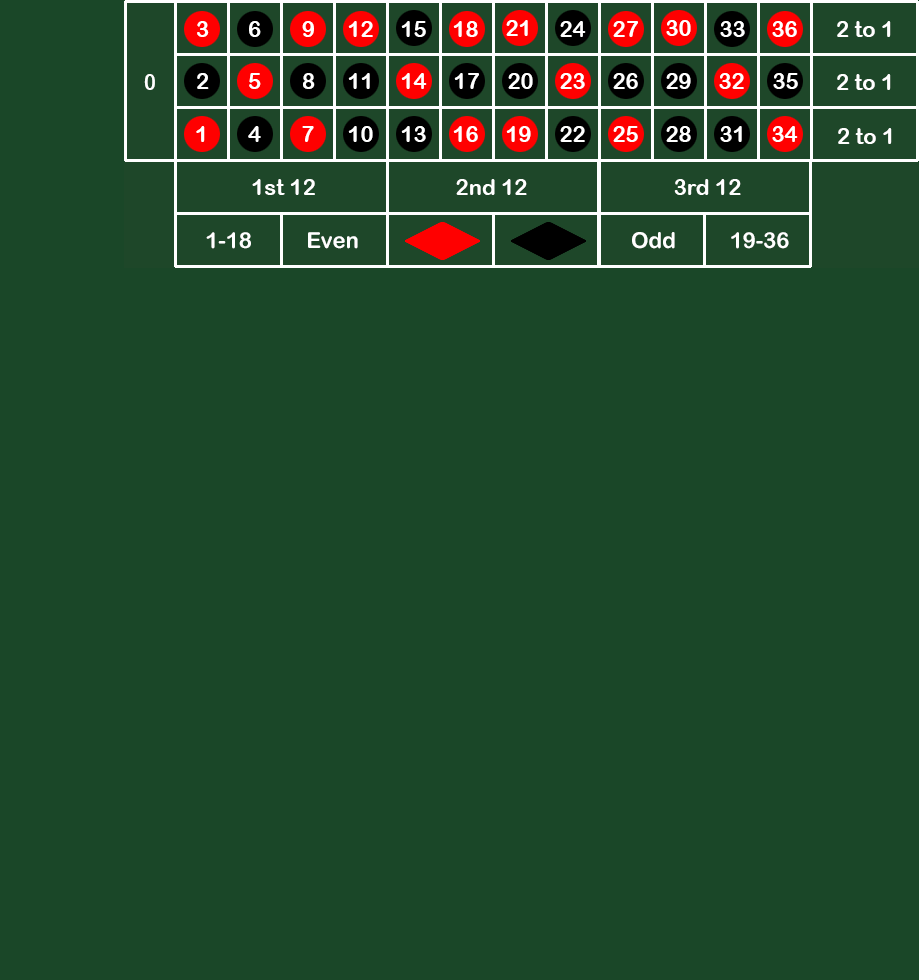
<style>
.page{position:relative;width:919px;height:980px;background:#1a4728}
.page>*{position:absolute;margin:0}
.t1{font:22px "ArialRoundedMTBold";color:#ffffff}
.t2{font:22px "ArialRoundedMTBold";color:#ffffff;scale:0.93 1}
</style>
<div class="page">
<p class="t1" style="left:197px;top:21px;width:12px;height:16px">3</p>
<p class="t1" style="left:249px;top:21px;width:12px;height:16px">6</p>
<p class="t1" style="left:302px;top:21px;width:12px;height:16px">9</p>
<p class="t1" style="left:348px;top:21px;width:25px;height:16px">12</p>
<p class="t1" style="left:401px;top:21px;width:25px;height:16px">15</p>
<p class="t1" style="left:453px;top:21px;width:25px;height:16px">18</p>
<p class="t1" style="left:506px;top:20px;width:22px;height:16px">21</p>
<p class="t1" style="left:560px;top:21px;width:26px;height:16px">24</p>
<p class="t1" style="left:613px;top:21px;width:25px;height:16px">27</p>
<p class="t1" style="left:666px;top:20px;width:25px;height:16px">30</p>
<p class="t1" style="left:720px;top:21px;width:25px;height:16px">33</p>
<p class="t1" style="left:772px;top:21px;width:25px;height:16px">36</p>
<p class="t1" style="left:837px;top:21px;width:54px;height:16px">2 to 1</p>
<p class="t2" style="left:144px;top:74px;width:11px;height:16px">0</p>
<p class="t1" style="left:197px;top:73px;width:12px;height:16px">2</p>
<p class="t1" style="left:249px;top:73px;width:12px;height:16px">5</p>
<p class="t1" style="left:303px;top:73px;width:12px;height:16px">8</p>
<p class="t1" style="left:348px;top:73px;width:22px;height:16px">11</p>
<p class="t1" style="left:401px;top:73px;width:26px;height:16px">14</p>
<p class="t1" style="left:454px;top:73px;width:25px;height:16px">17</p>
<p class="t1" style="left:508px;top:73px;width:25px;height:16px">20</p>
<p class="t1" style="left:560px;top:73px;width:25px;height:16px">23</p>
<p class="t1" style="left:613px;top:73px;width:25px;height:16px">26</p>
<p class="t1" style="left:666px;top:73px;width:25px;height:16px">29</p>
<p class="t1" style="left:719px;top:73px;width:25px;height:16px">32</p>
<p class="t1" style="left:773px;top:73px;width:25px;height:16px">35</p>
<p class="t1" style="left:837px;top:74px;width:54px;height:16px">2 to 1</p>
<p class="t1" style="left:196px;top:126px;width:9px;height:16px">1</p>
<p class="t1" style="left:248px;top:126px;width:13px;height:16px">4</p>
<p class="t1" style="left:302px;top:126px;width:12px;height:16px">7</p>
<p class="t1" style="left:348px;top:126px;width:25px;height:16px">10</p>
<p class="t1" style="left:401px;top:126px;width:25px;height:16px">13</p>
<p class="t1" style="left:453px;top:126px;width:25px;height:16px">16</p>
<p class="t1" style="left:506px;top:126px;width:25px;height:16px">19</p>
<p class="t1" style="left:560px;top:126px;width:25px;height:16px">22</p>
<p class="t1" style="left:613px;top:126px;width:25px;height:16px">25</p>
<p class="t1" style="left:666px;top:126px;width:25px;height:16px">28</p>
<p class="t1" style="left:720px;top:126px;width:22px;height:16px">31</p>
<p class="t1" style="left:772px;top:126px;width:26px;height:16px">34</p>
<p class="t1" style="left:838px;top:128px;width:54px;height:16px">2 to 1</p>
<p class="t1" style="left:252px;top:179px;width:63px;height:16px">1st 12</p>
<p class="t1" style="left:456px;top:179px;width:71px;height:16px">2nd 12</p>
<p class="t1" style="left:674px;top:179px;width:67px;height:16px">3rd 12</p>
<p class="t1" style="left:206px;top:232px;width:45px;height:17px">1-18</p>
<p class="t1" style="left:308px;top:232px;width:50px;height:17px">Even</p>
<p class="t1" style="left:632px;top:232px;width:43px;height:17px">Odd</p>
<p class="t1" style="left:731px;top:232px;width:58px;height:17px">19-36</p>
</div>
